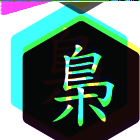
<style>
.page{position:relative;width:140px;height:140px;background:#060808}
.page>*{position:absolute;margin:0}
.t1{font:90px "DFKaiShu-SB-Estd-BF";letter-spacing:0.01em;color:#190808}
</style>
<div class="page">
<p class="t1" style="left:40px;top:26px;width:63px;height:83px">梟</p>
</div>
